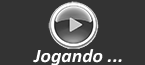
<style>
.page{position:relative;width:145px;height:65px;background:#333333}
.page>*{position:absolute;margin:0}
.t1{font:19px "Calibri-BoldItalic";color:#ffffff;scale:1.04 1}
</style>
<div class="page">
<p class="t1" style="left:33px;top:49px;width:89px;height:17px">Jogando ...</p>
</div>
